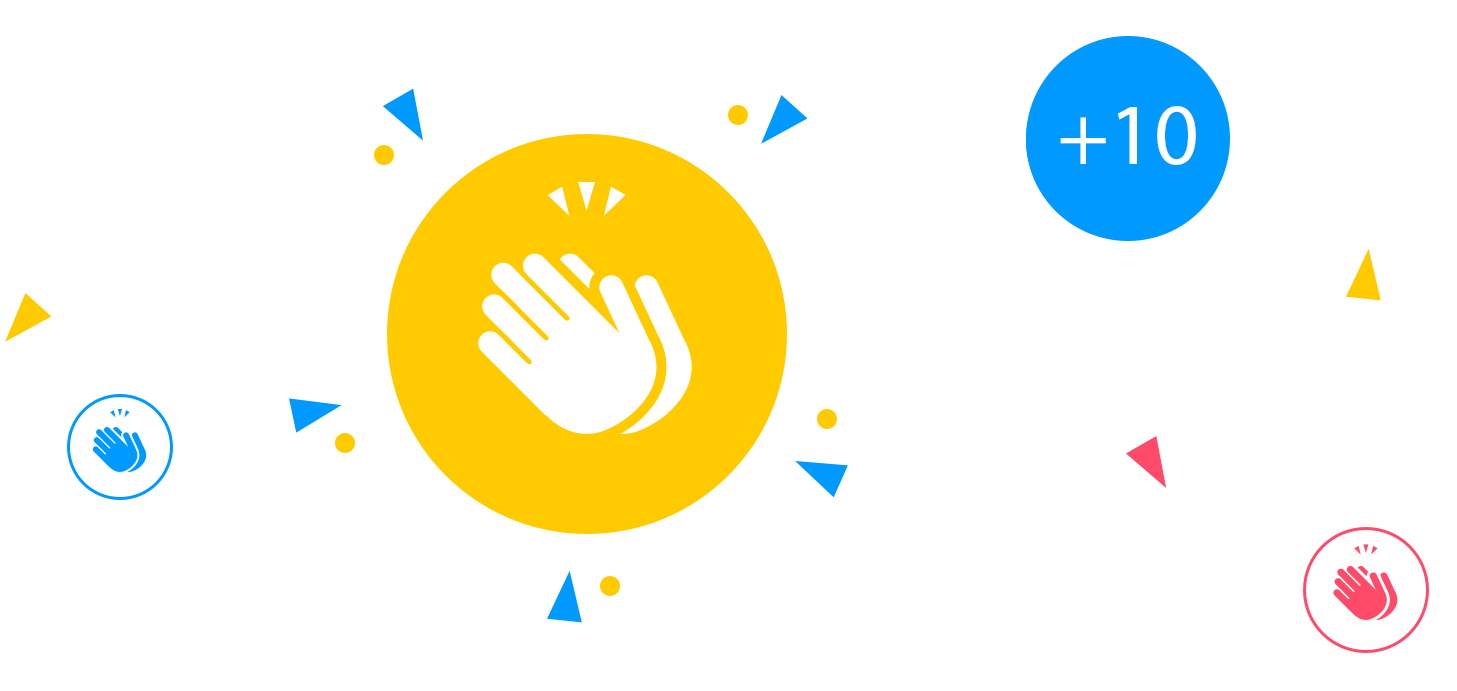
<style>
.page{position:relative;width:1457px;height:691px;background:#ffffff}
.page>*{position:absolute;margin:0}
.t1{font:87.6px "MyriadPro-Regular";color:#ffffff}
</style>
<div class="page">
<p class="t1" style="left:1060px;top:106px;width:136px;height:59px">+10</p>
</div>
